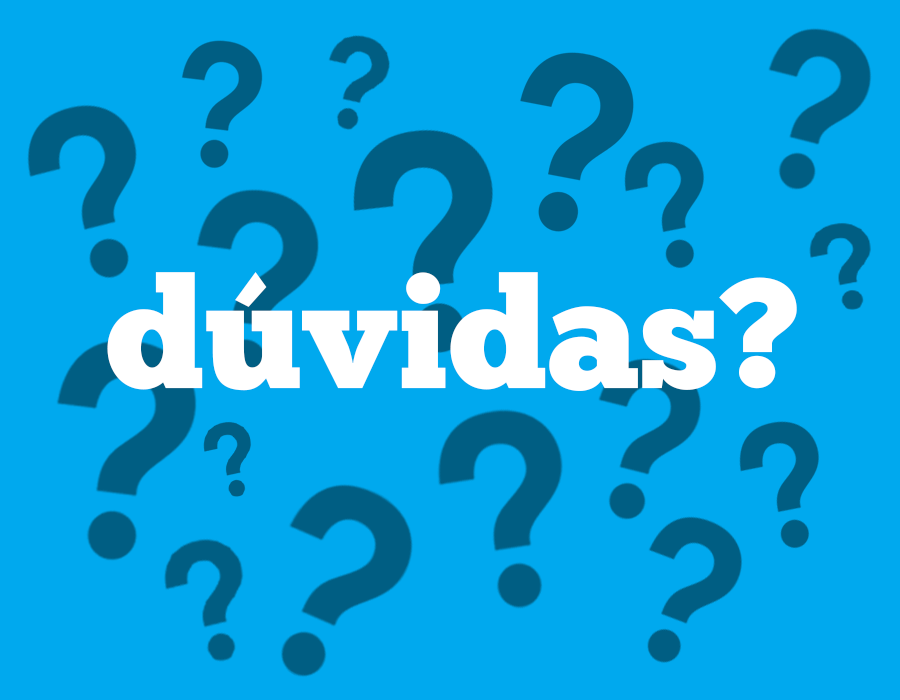
<style>
.page{position:relative;width:900px;height:700px;background:#00a9ee}
.page>*{position:absolute;margin:0}
.t1{font:154.4px "ChunkFive-Roman";color:#ffffff}
</style>
<div class="page">
<p class="t1" style="left:107px;top:272px;width:690px;height:119px">dúvidas?</p>
</div>
